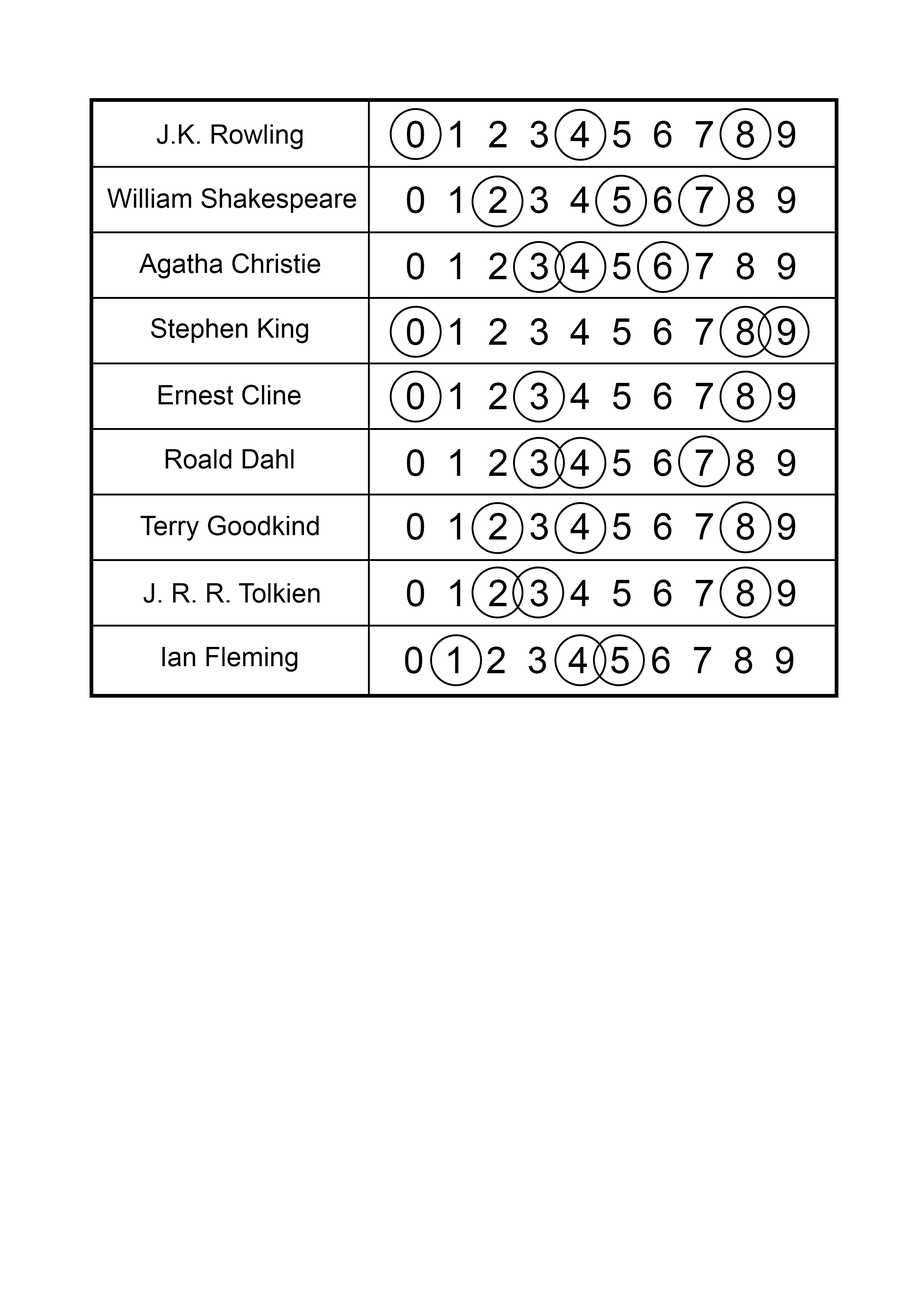
<style>
.page{position:relative;width:918px;height:1299px;background:#ffffff}
.page>*{position:absolute;margin:0}
.t1{font:26.7px "ArialMT";color:#000000}
.t2{font:37px "ArialMT";letter-spacing:0.14em;color:#000000}
</style>
<div class="page">
<p class="t1" style="left:157px;top:124px;width:146px;height:25px">J.K. Rowling</p>
<p class="t2" style="left:407px;top:121px;width:389px;height:27px">0 1 2 3 4 5 6 7 8 9</p>
<p class="t1" style="left:107px;top:188px;width:250px;height:25px">William Shakespeare</p>
<p class="t2" style="left:407px;top:186px;width:389px;height:27px">0 1 2 3 4 5 6 7 8 9</p>
<p class="t1" style="left:139px;top:253px;width:182px;height:25px">Agatha Christie</p>
<p class="t2" style="left:407px;top:252px;width:389px;height:28px">0 1 2 3 4 5 6 7 8 9</p>
<p class="t1" style="left:151px;top:318px;width:157px;height:25px">Stephen King</p>
<p class="t2" style="left:407px;top:318px;width:389px;height:27px">0 1 2 3 4 5 6 7 8 9</p>
<p class="t1" style="left:158px;top:385px;width:143px;height:20px">Ernest Cline</p>
<p class="t2" style="left:407px;top:382px;width:389px;height:27px">0 1 2 3 4 5 6 7 8 9</p>
<p class="t1" style="left:165px;top:449px;width:129px;height:20px">Roald Dahl</p>
<p class="t2" style="left:407px;top:449px;width:389px;height:27px">0 1 2 3 4 5 6 7 8 9</p>
<p class="t1" style="left:140px;top:515px;width:179px;height:26px">Terry Goodkind</p>
<p class="t2" style="left:407px;top:513px;width:389px;height:27px">0 1 2 3 4 5 6 7 8 9</p>
<p class="t2" style="left:407px;top:579px;width:389px;height:27px">0 1 2 3 4 5 6 7 8 9</p>
<p class="t1" style="left:144px;top:583px;width:176px;height:20px">J. R. R. Tolkien</p>
<p class="t1" style="left:162px;top:647px;width:136px;height:25px">Ian Fleming</p>
<p class="t2" style="left:405px;top:646px;width:389px;height:27px">0 1 2 3 4 5 6 7 8 9</p>
</div>
